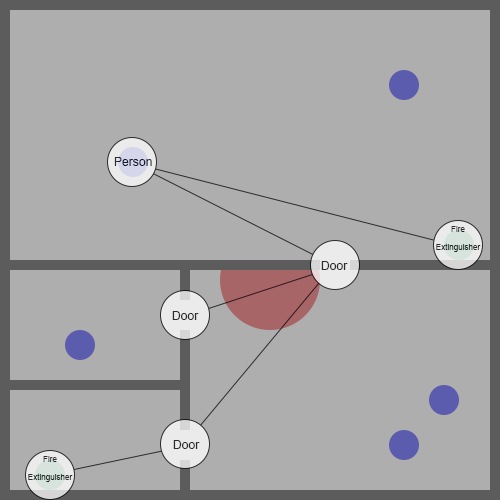
<style>
.page{position:relative;width:500px;height:500px;background:#aeaeae}
.page>*{position:absolute;margin:0}
.t1{font:12px "ArialMT";letter-spacing:0.005em;color:#17172c}
.t2{font:8px/18px "ArialMT";letter-spacing:0.005em}
.t3{font:12px "ArialMT";letter-spacing:0.005em;color:#2c2c2c}
</style>
<div class="page">
<p class="t1" style="left:114px;top:157px;width:38px;height:9px">Person</p>
<p class="t2" style="left:436px;top:226px;width:45px;height:26px;text-align:center">Fire<br>Extinguisher</p>
<p class="t3" style="left:321px;top:261px;width:27px;height:9px">Door</p>
<p class="t3" style="left:172px;top:311px;width:27px;height:9px">Door</p>
<p class="t3" style="left:173px;top:440px;width:27px;height:9px">Door</p>
<p class="t2" style="left:28px;top:456px;width:45px;height:26px;text-align:center">Fire<br>Extinguisher</p>
</div>
